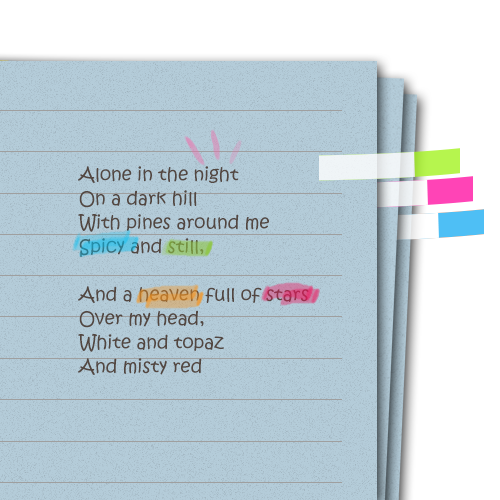
<style>
.page{position:relative;width:500px;height:500px;background:#b4ccd9}
.page>*{position:absolute;margin:0}
.t1{font:18px/24px "KristenITC-Regular";color:#534741}
</style>
<div class="page">
<p class="t1" style="left:78px;top:166px;width:231px;height:209px">Alone in the night<br>On a dark hill<br>With pines around me<br>Spicy and still,<br><br>And a heaven full of stars<br>Over my head,<br>White and topaz<br>And misty red</p>
</div>
